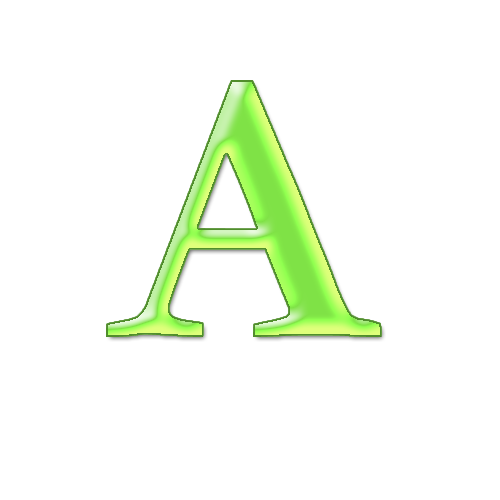
<style>
.page{position:relative;width:500px;height:500px;background:#ffffff}
.page>*{position:absolute;margin:0}
.t1{font:400px "Garamond-Bold"}
</style>
<div class="page">
<p class="t1" style="left:106px;top:80px;width:276px;height:257px">A</p>
</div>
